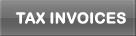
<style>
.page{position:relative;width:136px;height:36px}
.page>*{position:absolute;margin:0}
.t1{font:15px "ArialRoundedMTBold";color:#ffffff;font-weight:bold}
</style>
<div class="page">
<p class="t1" style="left:15px;top:12px;width:111px;height:12px">TAX INVOICES</p>
</div>
